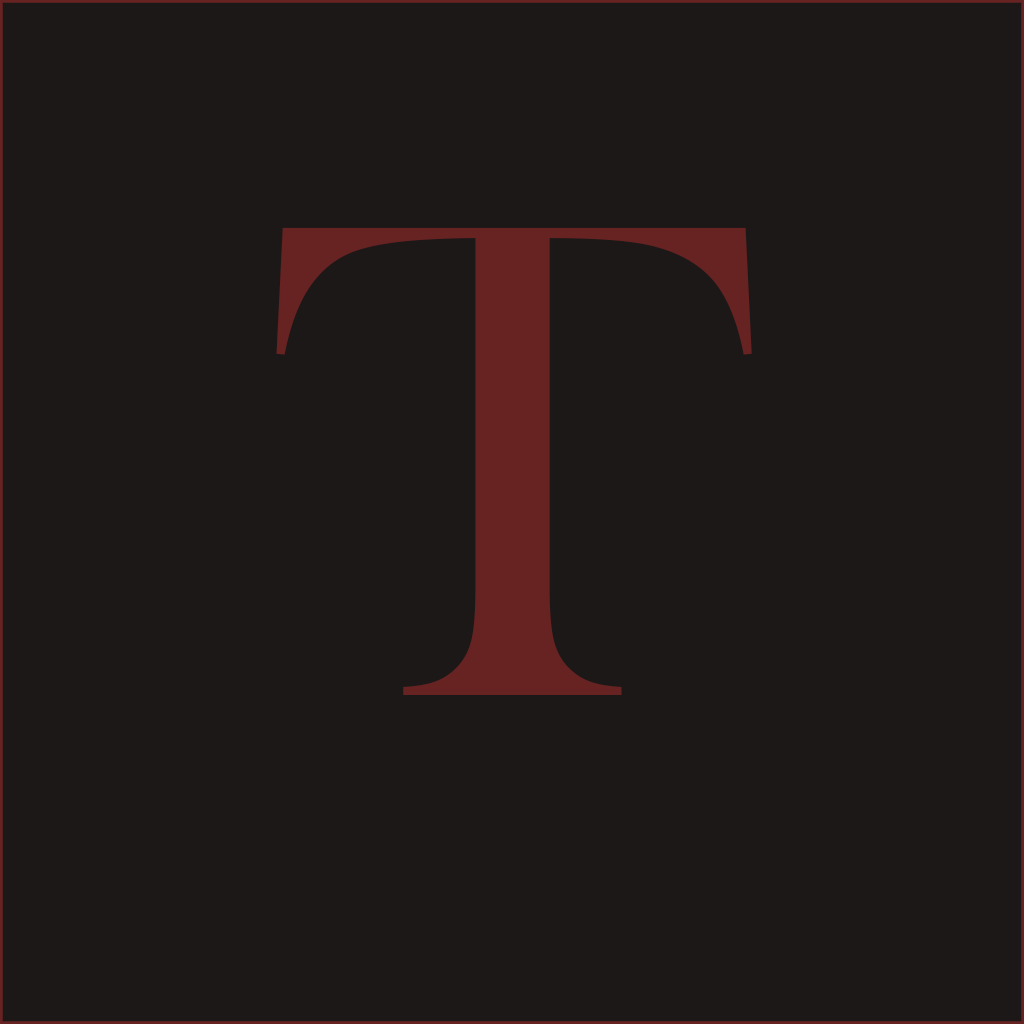
<style>
.page{position:relative;width:1024px;height:1024px;background:#1c1818}
.page>*{position:absolute;margin:0}
.t1{font:700px "BaskOldFace";color:#672222}
</style>
<div class="page">
<p class="t1" style="left:276px;top:227px;width:476px;height:468px">T</p>
</div>
